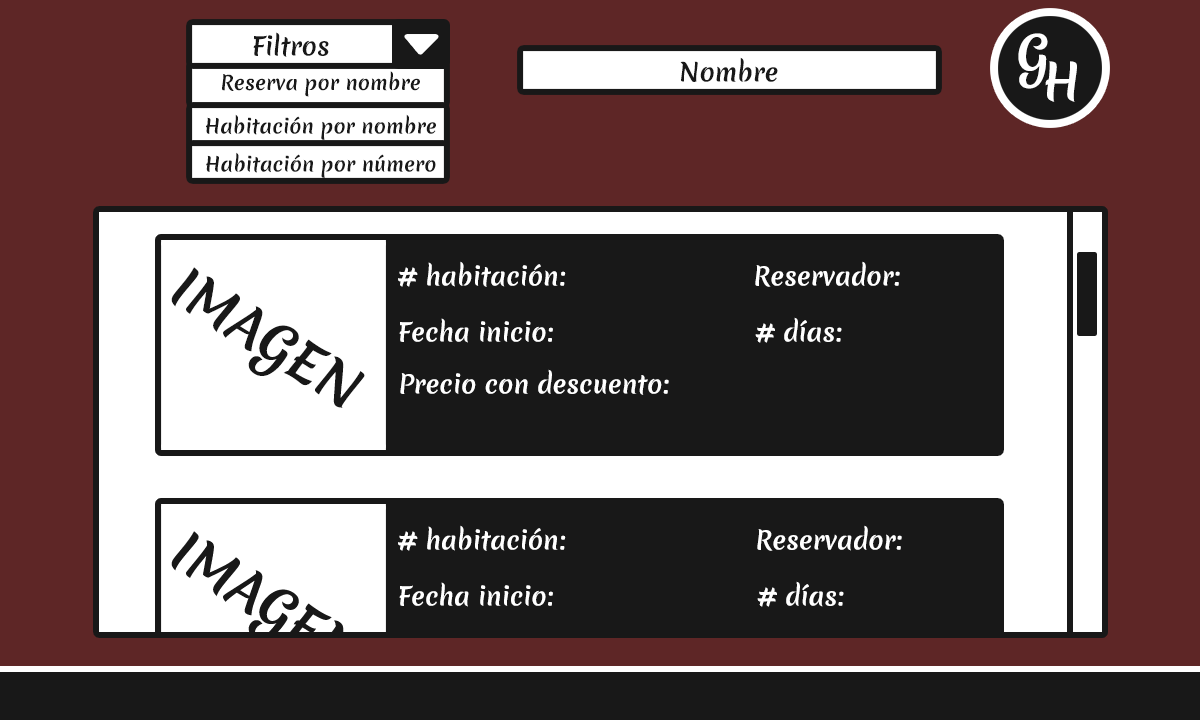
<style>
.page{position:relative;width:1200px;height:720px;background:#181818}
.page>*{position:absolute;margin:0}
.t1{font:24.6px "MeriendaOne-Regular";color:#181818}
.t2{font:48.4px "MeriendaOne-Regular";color:#ffffff}
.t3{font:19.6px "MeriendaOne-Regular";color:#181818}
.t4{font:51.9px "MeriendaOne-Regular";color:#181818}
.t5{font:24.6px "MeriendaOne-Regular";color:#ffffff}
</style>
<div class="page">
<p class="t1" style="left:253px;top:32px;width:76px;height:25px">Filtros</p>
<p class="t2" style="left:1018px;top:33px;width:30px;height:56px">G</p>
<p class="t1" style="left:680px;top:57px;width:98px;height:25px">Nombre</p>
<p class="t2" style="left:1045px;top:61px;width:32px;height:41px">H</p>
<p class="t3" style="left:222px;top:71px;width:198px;height:26px">Reserva por nombre</p>
<p class="t3" style="left:206px;top:114px;width:230px;height:26px">Habitación por nombre</p>
<p class="t3" style="left:206px;top:152px;width:230px;height:26px">Habitación por número</p>
<p class="t4" style="left:171px;top:267px;width:194px;height:141px;rotate:32deg">IMAGEN</p>
<p class="t5" style="left:398px;top:261px;width:168px;height:26px"># habitación:</p>
<p class="t5" style="left:755px;top:261px;width:145px;height:26px">Reservador:</p>
<p class="t5" style="left:399px;top:318px;width:154px;height:25px">Fecha inicio:</p>
<p class="t5" style="left:755px;top:317px;width:87px;height:26px"># días:</p>
<p class="t5" style="left:400px;top:369px;width:269px;height:26px">Precio con descuento:</p>
<p class="t5" style="left:398px;top:525px;width:168px;height:26px"># habitación:</p>
<p class="t5" style="left:757px;top:525px;width:145px;height:26px">Reservador:</p>
<p class="t5" style="left:399px;top:582px;width:154px;height:25px">Fecha inicio:</p>
<p class="t5" style="left:757px;top:581px;width:87px;height:26px"># días:</p>
</div>
